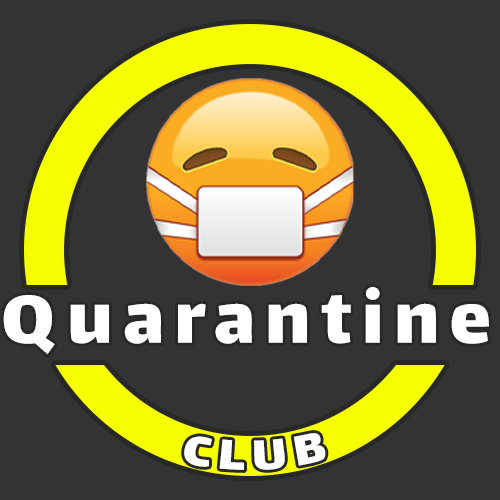
<style>
.page{position:relative;width:500px;height:500px;background:#333333}
.page>*{position:absolute;margin:0}
.t1{font:82.8px "Lalezar-Regular";letter-spacing:0.13em;color:#ffffff}
.t2{font:50px "Lalezar-Regular";letter-spacing:0.13em;color:#ffffff}
</style>
<div class="page">
<p class="t1" style="left:3px;top:287px;width:486px;height:68px">Quarantine</p>
<p class="t2" style="left:184px;top:433px;width:142px;height:37px;rotate:-2deg">CLUB</p>
</div>
